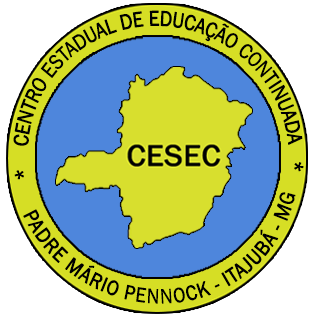
<style>
.page{position:relative;width:312px;height:324px;background:#ffffff}
.page>*{position:absolute;margin:0}
.t1{font:21.3px "FranklinGothic-Book";letter-spacing:0.005em;color:#000000;font-weight:bold;scale:0.93 1}
.t2{font:21.5px "FranklinGothic-Book";letter-spacing:0.005em;color:#000000;font-weight:bold;scale:0.88 1}
</style>
<div class="page">
<p class="t1" style="left:13px;top:10px;width:291px;height:170px;rotate:-87deg">*    CENTRO ESTADUAL DE EDUCAÇÃO CONTINUADA   *</p>
<p class="t2" style="left:23px;top:192px;width:273px;height:112px;rotate:-44deg">PADRE MÁRIO PENNOCK - ITAJUBÁ - MG</p>
</div>
